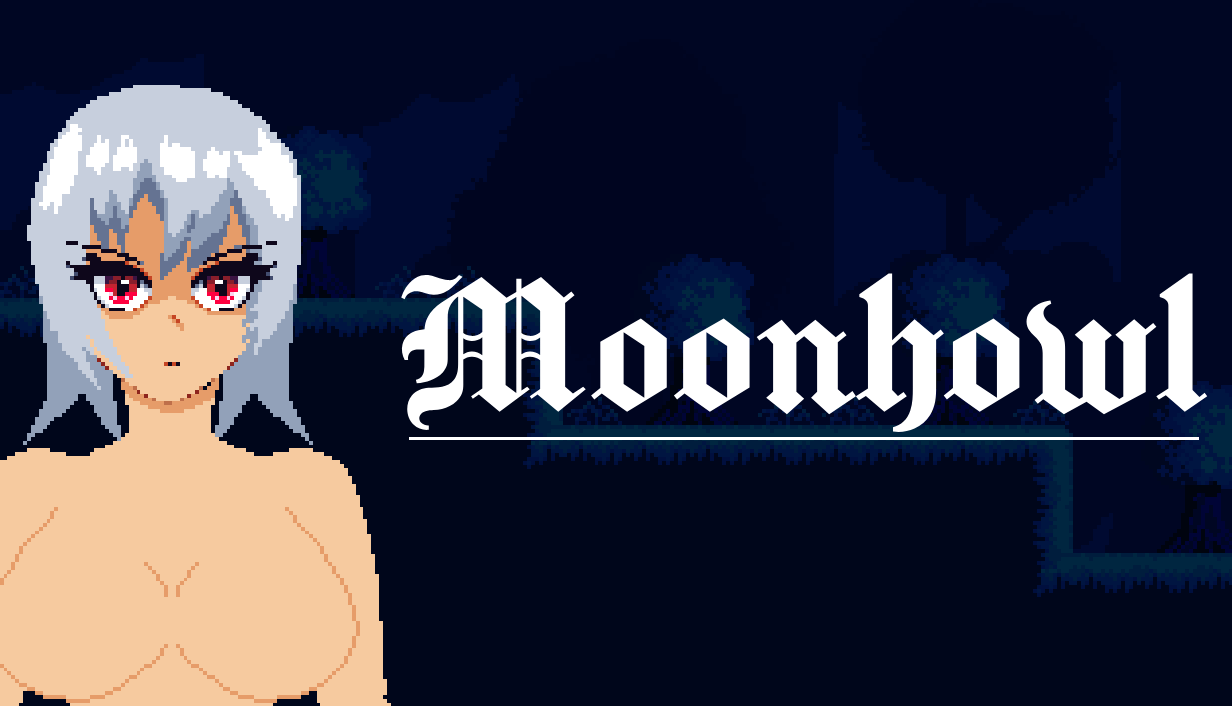
<style>
.page{position:relative;width:1232px;height:706px;background:#00061b}
.page>*{position:absolute;margin:0}
.t1{font:180px "Chomsky";color:#ffffff}
</style>
<div class="page">
<p class="t1" style="left:401px;top:273px;width:807px;height:159px">Moonhowl</p>
</div>
